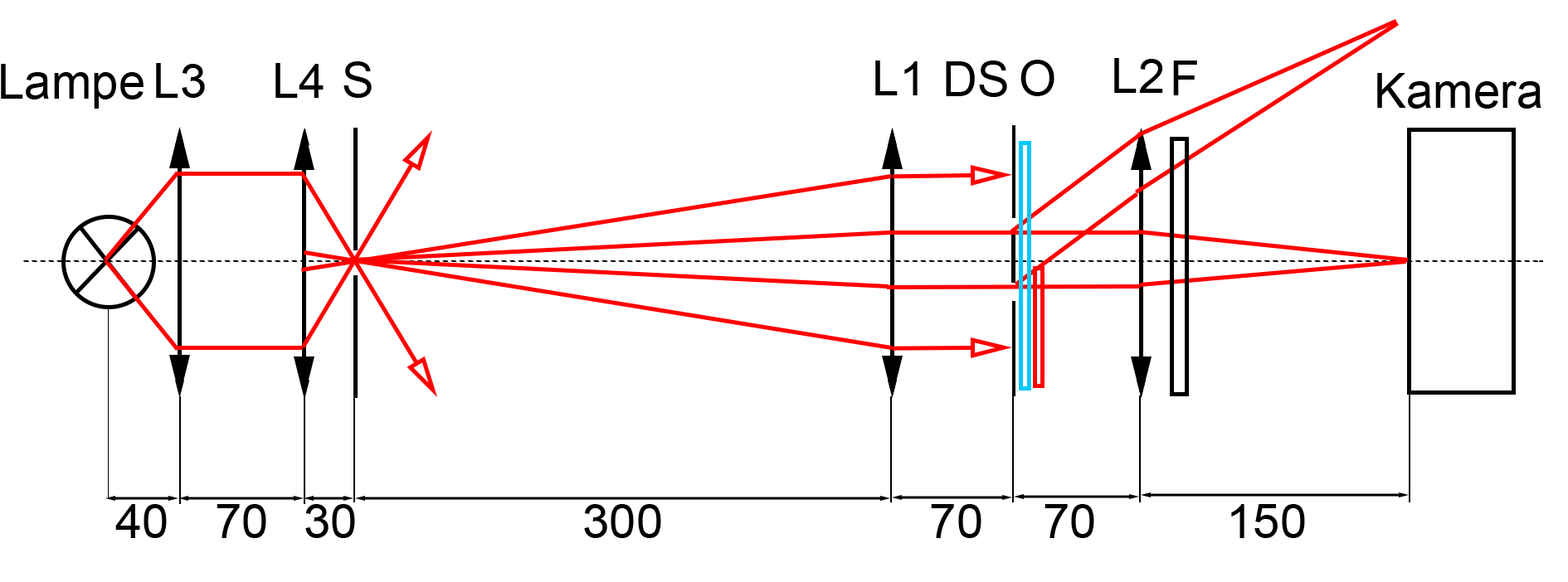
<style>
.page{position:relative;width:1568px;height:582px;background:#ffffff}
.page>*{position:absolute;margin:0}
.t1{font:48.4px "ArialMT";color:#000000}
</style>
<div class="page">
<p class="t1" style="left:1px;top:64px;width:143px;height:45px">Lampe</p>
<p class="t1" style="left:156px;top:63px;width:49px;height:35px">L3</p>
<p class="t1" style="left:275px;top:63px;width:49px;height:35px">L4</p>
<p class="t1" style="left:343px;top:61px;width:29px;height:37px">S</p>
<p class="t1" style="left:875px;top:61px;width:43px;height:34px">L1</p>
<p class="t1" style="left:946px;top:61px;width:61px;height:36px">DS</p>
<p class="t1" style="left:1020px;top:60px;width:34px;height:36px">O</p>
<p class="t1" style="left:1114px;top:58px;width:49px;height:35px">L2</p>
<p class="t1" style="left:1173px;top:61px;width:24px;height:34px">F</p>
<p class="t1" style="left:1377px;top:73px;width:164px;height:36px">Kamera</p>
<p class="t1" style="left:115px;top:504px;width:52px;height:34px">40</p>
<p class="t1" style="left:217px;top:504px;width:49px;height:34px">70</p>
<p class="t1" style="left:305px;top:504px;width:50px;height:34px">30</p>
<p class="t1" style="left:584px;top:504px;width:77px;height:34px">300</p>
<p class="t1" style="left:931px;top:504px;width:50px;height:34px">70</p>
<p class="t1" style="left:1045px;top:504px;width:49px;height:34px">70</p>
<p class="t1" style="left:1231px;top:504px;width:74px;height:34px">150</p>
</div>
